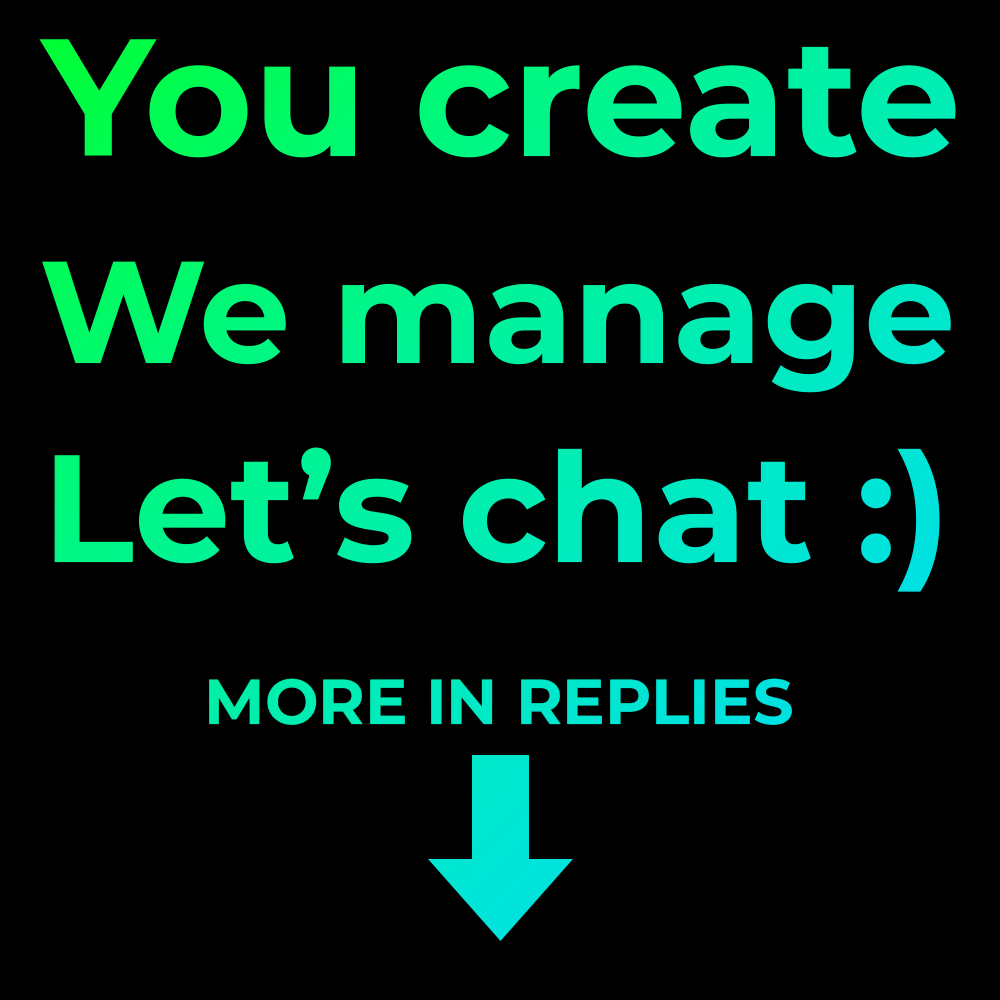
<style>
.page{position:relative;width:1000px;height:1000px;background:#000000}
.page>*{position:absolute;margin:0}
.t1{font:166.1px "MontserratRoman-Bold"}
.t2{font:144.8px "MontserratRoman-Bold"}
.t3{font:152.6px "MontserratRoman-Bold"}
.t4{font:63.5px "MontserratRoman-Bold"}
</style>
<div class="page">
<p class="t1" style="left:39px;top:39px;width:917px;height:119px">You create</p>
<p class="t2" style="left:42px;top:261px;width:909px;height:132px">We manage</p>
<p class="t3" style="left:54px;top:447px;width:886px;height:145px">Let’s chat :)</p>
<p class="t4" style="left:209px;top:678px;width:583px;height:47px">MORE IN REPLIES</p>
</div>
